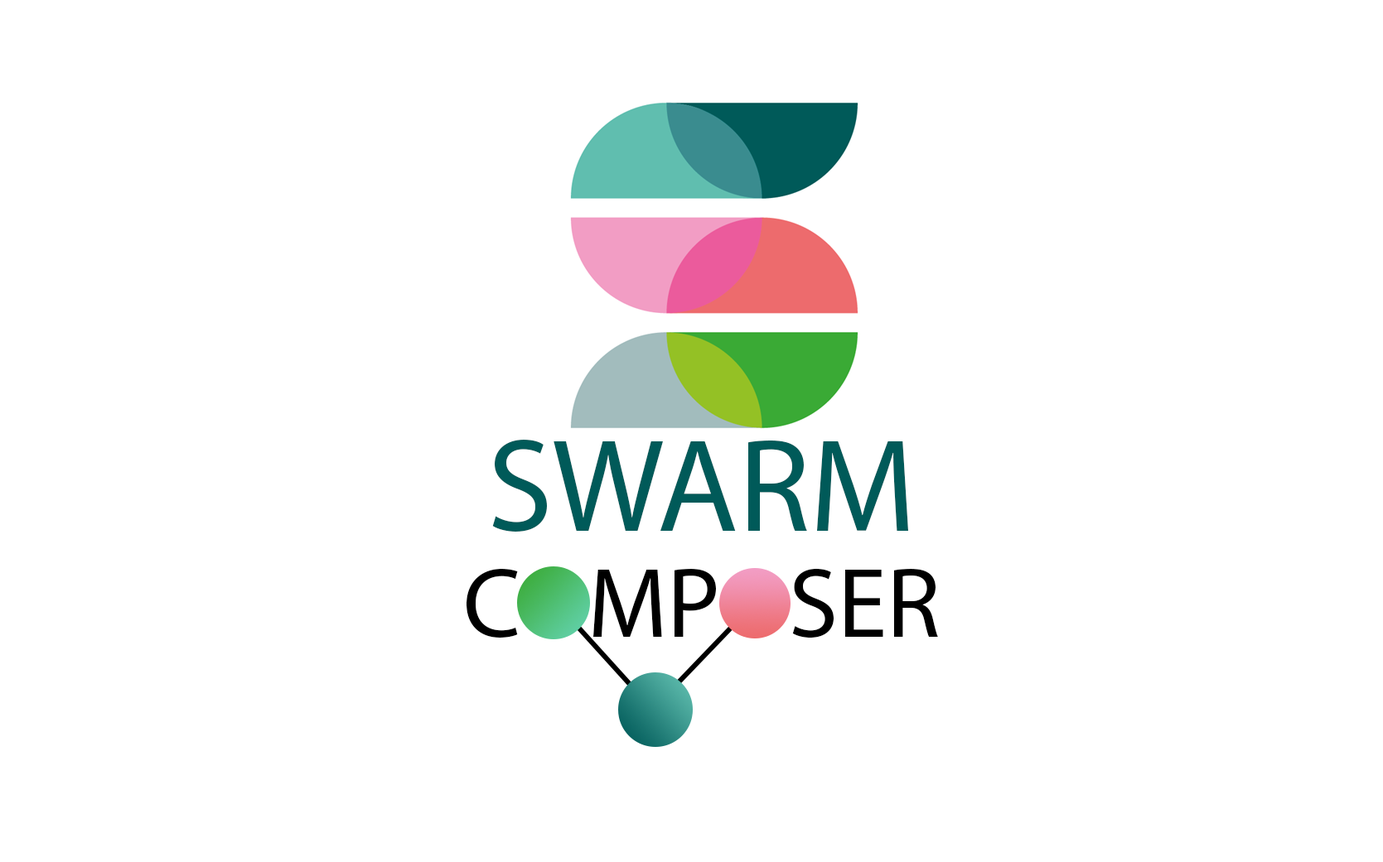
<style>
.page{position:relative;width:1383px;height:862px;background:#ffffff}
.page>*{position:absolute;margin:0}
.t1{font:132.6px "MyriadPro-Regular";color:#005a59}
.t2{font:99.4px "MyriadPro-Regular";color:#000000}
</style>
<div class="page">
<p class="t1" style="left:492px;top:440px;width:416px;height:92px">SWARM</p>
<p class="t2" style="left:466px;top:568px;width:472px;height:71px">COMPOSER</p>
</div>
